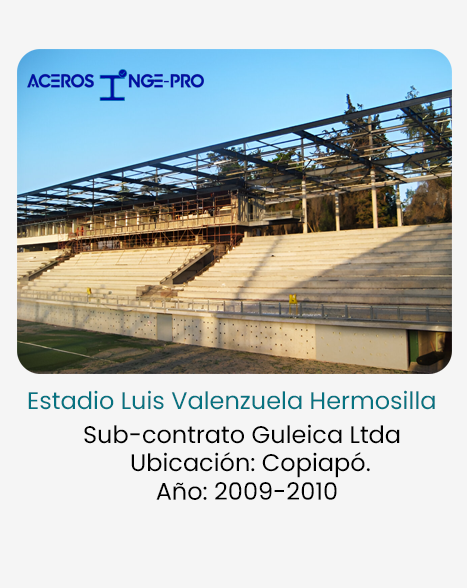
<style>
.page{position:relative;width:467px;height:588px;background:#f5f5f5}
.page>*{position:absolute;margin:0}
.t1{font:24px "Poppins-Regular";color:#067381}
.t2{font:24px "Poppins-Regular";color:#000000}
</style>
<div class="page">
<p class="t1" style="left:28px;top:390px;width:407px;height:20px">Estadio Luis Valenzuela Hermosilla</p>
<p class="t2" style="left:84px;top:424px;width:316px;height:20px">Sub-contrato Guleica Ltda</p>
<p class="t2" style="left:131px;top:452px;width:239px;height:48px">Ubicación: Copiapó.<br>    Año: 2009-2010</p>
</div>
